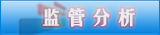
<style>
.page{position:relative;width:160px;height:35px}
.page>*{position:absolute;margin:0}
.t1{font:18px "FZYTK--GBK1-0";letter-spacing:-0.1em;color:#ededed;font-weight:bold;scale:1.27 1}
</style>
<div class="page">
<p class="t1" style="left:42px;top:8px;width:93px;height:19px">监 管 分 析</p>
</div>
